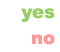
<style>
.page{position:relative;width:60px;height:52px;background:#ffffff}
.page>*{position:absolute;margin:0}
.t1{font:18px/26px "Arial-Black";color:#99cc66}
.t2{font:18px/26px "Arial-Black";color:#ff9999}
</style>
<div class="page">
<p class="t1" style="left:21px;top:8px;width:34px;height:37px;text-align:right">yes<br><span class="t2">no</span></p>
</div>
